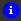
<style>
.page{position:relative;width:21px;height:21px;background:#333333}
.page>*{position:absolute;margin:0}
.t1{font:11px "TimesNewRomanPS-BoldMT";color:#ffffff}
</style>
<div class="page">
<p class="t1" style="left:9px;top:6px;width:4px;height:8px">i</p>
</div>
